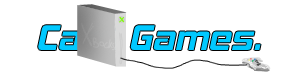
<style>
.page{position:relative;width:300px;height:75px;background:#ffffff}
.page>*{position:absolute;margin:0}
.t1{font:36px "HemiHeadRg-BoldItalic";color:#00c9ff}
</style>
<div class="page">
<p class="t1" style="left:38px;top:23px;width:223px;height:27px">Card Games.</p>
</div>
